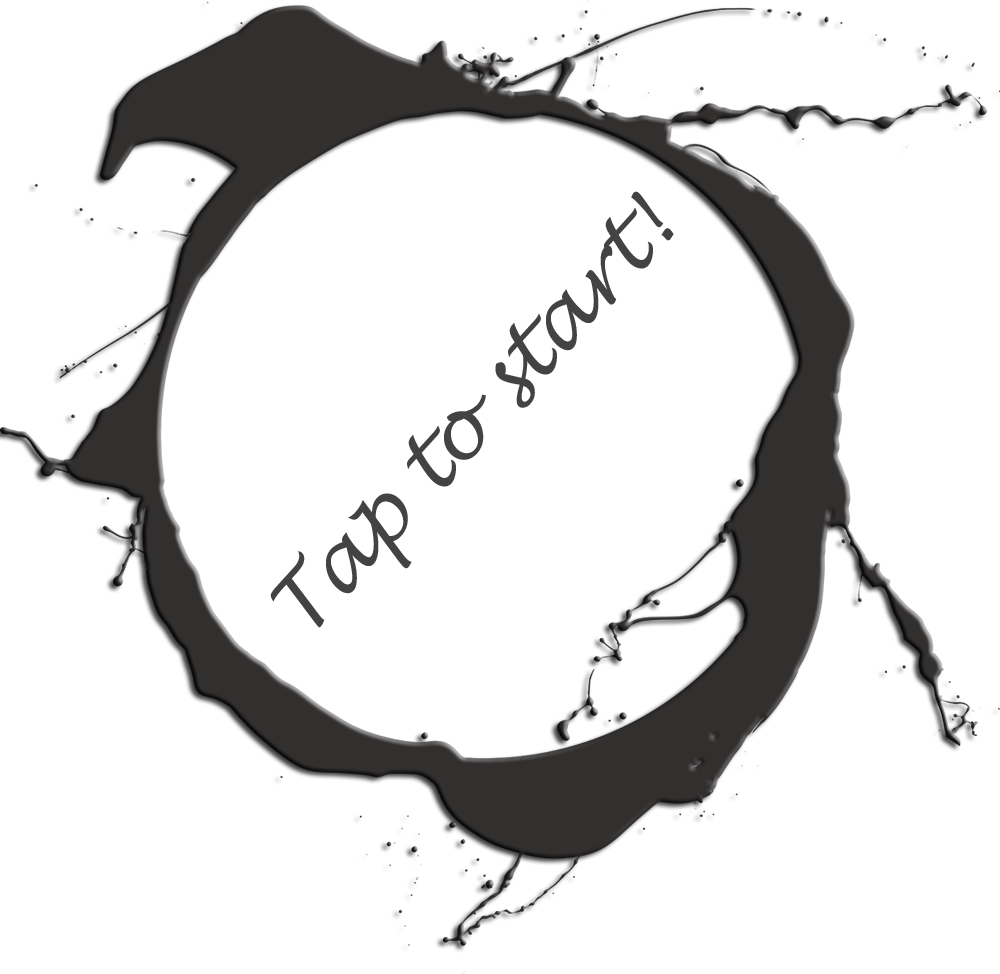
<style>
.page{position:relative;width:1000px;height:974px;background:#ffffff}
.page>*{position:absolute;margin:0}
.t1{font:80.7px "LucidaHandwriting-Italic";color:#444343}
</style>
<div class="page">
<p class="t1" style="left:270px;top:191px;width:404px;height:437px;rotate:-48deg">Tap to start!</p>
</div>
